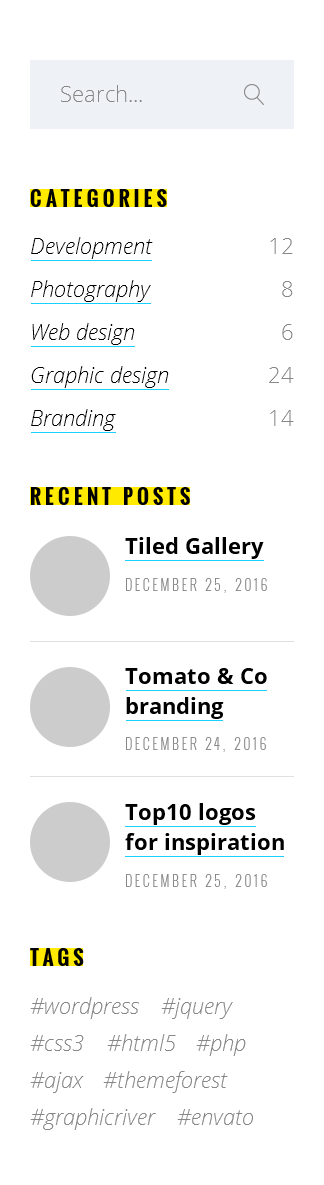
<style>
.page{position:relative;width:324px;height:1185px;background:#ffffff}
.page>*{position:absolute;margin:0}
.t1{font:22px "OpenSans-Light";color:#888888}
.t2{font:20px "Oswald-Bold";letter-spacing:0.2em;color:#000000;text-transform:uppercase}
.t3{font:22px "OpenSansLight-Italic";color:#000000}
.t4{font:22px "OpenSans-Bold";color:#000000}
.t5{font:14px "Oswald-Light";letter-spacing:0.2em;color:#888888;text-transform:uppercase}
.t6{font:22px/30px "OpenSans-Bold";color:#000000}
.t7{font:22px "OpenSansLight-Italic";color:#888888}
</style>
<div class="page">
<p class="t1" style="left:61px;top:85px;width:81px;height:17px">Search...</p>
<p class="t2" style="left:30px;top:189px;width:137px;height:18px">Categories</p>
<p class="t3" style="left:31px;top:237px;width:122px;height:22px">Development</p>
<p class="t1" style="left:270px;top:238px;width:23px;height:16px">12</p>
<p class="t3" style="left:31px;top:280px;width:120px;height:22px">Photography</p>
<p class="t1" style="left:282px;top:281px;width:11px;height:16px">8</p>
<p class="t3" style="left:32px;top:323px;width:103px;height:22px">Web design</p>
<p class="t1" style="left:282px;top:324px;width:11px;height:16px">6</p>
<p class="t3" style="left:31px;top:366px;width:138px;height:22px">Graphic design</p>
<p class="t1" style="left:269px;top:367px;width:25px;height:16px">24</p>
<p class="t3" style="left:31px;top:409px;width:85px;height:22px">Branding</p>
<p class="t1" style="left:270px;top:410px;width:24px;height:16px">14</p>
<p class="t2" style="left:31px;top:487px;width:159px;height:18px">Recent Posts</p>
<p class="t4" style="left:125px;top:537px;width:139px;height:22px">Tiled Gallery</p>
<p class="t5" style="left:126px;top:578px;width:141px;height:15px">December 25, 2016</p>
<p class="t6" style="left:125px;top:668px;width:142px;height:51px">Tomato &amp; Co branding</p>
<p class="t5" style="left:126px;top:737px;width:140px;height:15px">December 24, 2016</p>
<p class="t6" style="left:125px;top:803px;width:159px;height:52px">Top10 logos for inspiration</p>
<p class="t5" style="left:126px;top:874px;width:141px;height:15px">December 25, 2016</p>
<p class="t2" style="left:30px;top:948px;width:54px;height:18px">Tags</p>
<p class="t7" style="left:30px;top:997px;width:109px;height:22px">#wordpress</p>
<p class="t7" style="left:161px;top:998px;width:72px;height:21px">#jquery</p>
<p class="t7" style="left:30px;top:1035px;width:54px;height:16px">#css3</p>
<p class="t7" style="left:107px;top:1034px;width:69px;height:17px">#html5</p>
<p class="t7" style="left:196px;top:1034px;width:50px;height:22px">#php</p>
<p class="t7" style="left:30px;top:1072px;width:54px;height:21px">#ajax</p>
<p class="t7" style="left:103px;top:1071px;width:125px;height:22px">#themeforest</p>
<p class="t7" style="left:30px;top:1108px;width:126px;height:22px">#graphicriver</p>
<p class="t7" style="left:177px;top:1109px;width:76px;height:16px">#envato</p>
</div>
